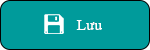
<style>
.page{position:relative;width:150px;height:50px;background:#009b9b}
.page>*{position:absolute;margin:0}
.t1{font:15.3px "TimesNewRomanPSMT";color:#fefefe}
</style>
<div class="page">
<p class="t1" style="left:76px;top:20px;width:26px;height:10px">Lưu</p>
</div>
